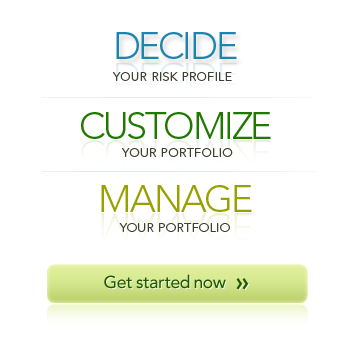
<style>
.page{position:relative;width:341px;height:339px;background:#ffffff}
.page>*{position:absolute;margin:0}
.t1{font:37.8px "Avenir-Light";letter-spacing:-0.06em;color:#1d85ad}
.t2{font:12.5px "Avenir-Light";letter-spacing:0.02em;color:#403e30}
.t3{font:37.8px "Avenir-Light";letter-spacing:-0.06em;color:#1f7800}
.t4{font:37.8px "Avenir-Light";letter-spacing:-0.06em;color:#98a100}
.t5{font:17.4px "Avenir-Medium";letter-spacing:-0.04em;color:#205a00}
.t6{font:25.5px "Avenir-Heavy";color:#205a00}
</style>
<div class="page">
<p class="t1" style="left:116px;top:32px;width:121px;height:27px">DECIDE</p>
<p class="t2" style="left:112px;top:72px;width:120px;height:9px">YOUR RISK PROFILE</p>
<p class="t3" style="left:81px;top:112px;width:190px;height:27px">CUSTOMIZE</p>
<p class="t2" style="left:121px;top:148px;width:112px;height:9px">YOUR PORTFOLIO</p>
<p class="t4" style="left:101px;top:185px;width:151px;height:27px">MANAGE</p>
<p class="t2" style="left:119px;top:223px;width:111px;height:9px">YOUR PORTFOLIO</p>
<p class="t5" style="left:104px;top:274px;width:122px;height:15px">Get started now</p>
<p class="t6" style="left:236px;top:278px;width:7px;height:12px">›</p>
<p class="t6" style="left:242px;top:278px;width:7px;height:12px">›</p>
</div>
